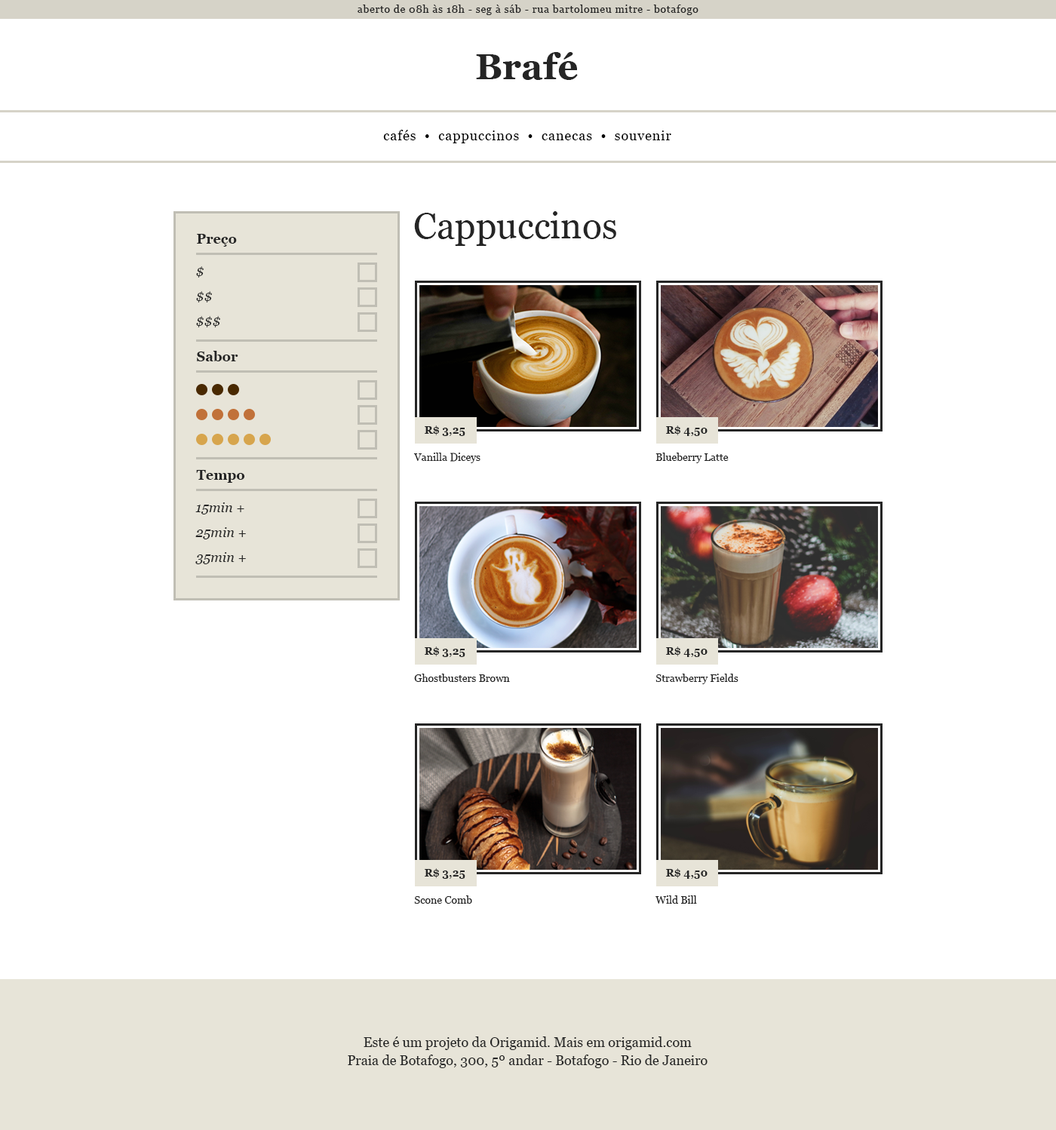
<style>
.page{position:relative;width:1056px;height:1130px;background:#ffffff}
.page>*{position:absolute;margin:0}
.t1{font:10.6px "Georgia";letter-spacing:0.05em;color:#252525}
.t2{font:36.2px "Georgia-Bold";color:#252525}
.t3{font:13.6px "Georgia";letter-spacing:0.05em;color:#000000}
.t4{font:36.2px "Georgia";color:#252525}
.t5{font:13.6px "Georgia-Bold";color:#252525}
.t6{font:13.6px "Georgia-Italic";color:#252525}
.t7{font:10.6px "Georgia-Bold";color:#252525}
.t8{font:10.6px "Georgia";color:#252525}
.t9{font:13.6px/18.1px "Georgia";color:#252525}
</style>
<div class="page">
<p class="t1" style="left:357px;top:5px;width:341px;height:10px">aberto de 08h às 18h - seg à sáb - rua bartolomeu mitre - botafogo</p>
<p class="t2" style="left:476px;top:52px;width:102px;height:28px">Brafé</p>
<p class="t3" style="left:383px;top:130px;width:288px;height:13px">cafés  •  cappuccinos  •  canecas  •  souvenir</p>
<p class="t4" style="left:414px;top:211px;width:202px;height:35px">Cappuccinos</p>
<p class="t5" style="left:197px;top:234px;width:40px;height:13px">Preço</p>
<p class="t6" style="left:196px;top:266px;width:8px;height:11px">$</p>
<p class="t6" style="left:196px;top:291px;width:16px;height:11px">$$</p>
<p class="t6" style="left:196px;top:316px;width:24px;height:11px">$$$</p>
<p class="t5" style="left:197px;top:351px;width:41px;height:10px">Sabor</p>
<p class="t7" style="left:425px;top:425px;width:40px;height:11px">R$ 3,25</p>
<p class="t7" style="left:666px;top:425px;width:41px;height:11px">R$ 4,50</p>
<p class="t8" style="left:413px;top:452px;width:67px;height:11px">Vanilla Diceys</p>
<p class="t8" style="left:655px;top:452px;width:73px;height:11px">Blueberry Latte</p>
<p class="t5" style="left:196px;top:470px;width:48px;height:13px">Tempo</p>
<p class="t6" style="left:195px;top:502px;width:49px;height:12px">15min +</p>
<p class="t6" style="left:195px;top:527px;width:51px;height:12px">25min +</p>
<p class="t6" style="left:195px;top:552px;width:51px;height:12px">35min +</p>
<p class="t7" style="left:425px;top:646px;width:40px;height:11px">R$ 3,25</p>
<p class="t7" style="left:666px;top:646px;width:41px;height:11px">R$ 4,50</p>
<p class="t8" style="left:414px;top:673px;width:96px;height:9px">Ghostbusters Brown</p>
<p class="t8" style="left:655px;top:673px;width:83px;height:11px">Strawberry Fields</p>
<p class="t7" style="left:425px;top:868px;width:40px;height:10px">R$ 3,25</p>
<p class="t7" style="left:666px;top:868px;width:41px;height:10px">R$ 4,50</p>
<p class="t8" style="left:414px;top:895px;width:58px;height:8px">Scone Comb</p>
<p class="t8" style="left:655px;top:895px;width:42px;height:8px">Wild Bill</p>
<p class="t9" style="left:348px;top:1036px;width:359px;height:32px;text-align:center">Este é um projeto da Origamid. Mais em origamid.com<br>Praia de Botafogo, 300, 5º andar - Botafogo - Rio de Janeiro</p>
</div>
